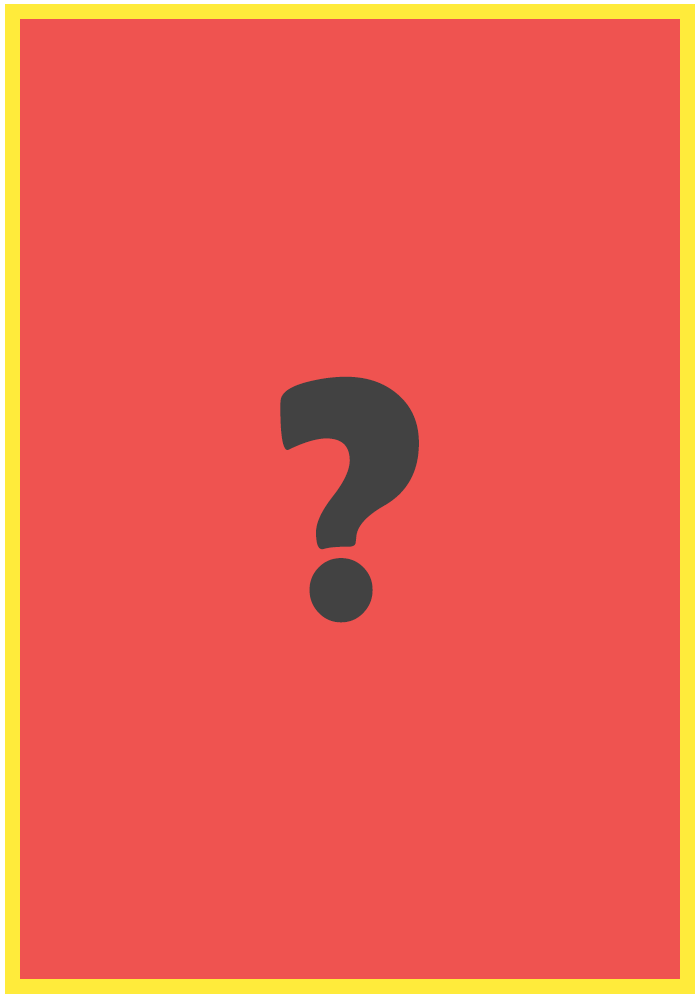
<style>
.page{position:relative;width:700px;height:1000px;background:#ef5350}
.page>*{position:absolute;margin:0}
.t1{font:350px "BerlinSansFBDemi-Bold";color:#424242}
</style>
<div class="page">
<p class="t1" style="left:280px;top:376px;width:139px;height:247px">?</p>
</div>
